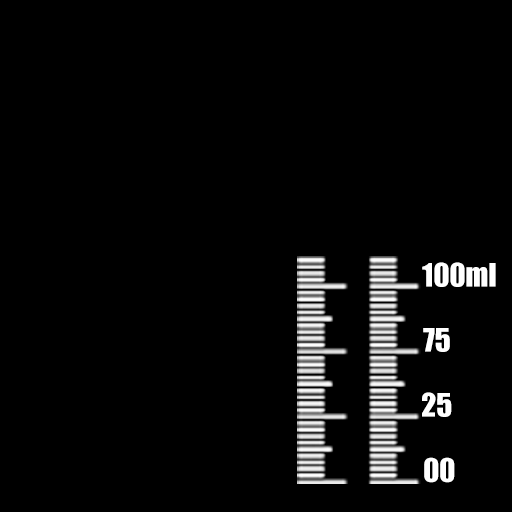
<style>
.page{position:relative;width:512px;height:512px;background:#000000}
.page>*{position:absolute;margin:0}
.t1{font:29.8px "Impact";color:#ffffff}
</style>
<div class="page">
<p class="t1" style="left:422px;top:262px;width:74px;height:25px">100ml</p>
<p class="t1" style="left:423px;top:328px;width:27px;height:24px">75</p>
<p class="t1" style="left:422px;top:392px;width:30px;height:25px">25</p>
<p class="t1" style="left:424px;top:457px;width:31px;height:26px">00</p>
</div>
